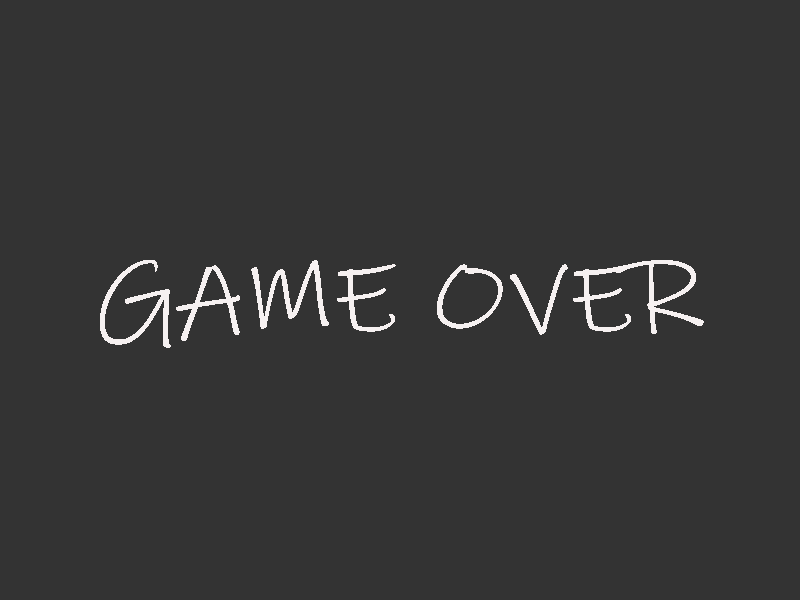
<style>
.page{position:relative;width:800px;height:600px;background:#333333}
.page>*{position:absolute;margin:0}
.t1{font:100px "InkFree";color:#f6f1f1;scale:1.1 1}
</style>
<div class="page">
<p class="t1" style="left:100px;top:260px;width:604px;height:88px">GAME OVER</p>
</div>
